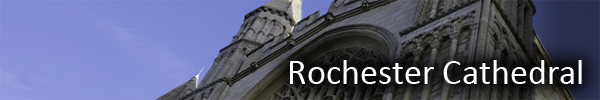
<style>
.page{position:relative;width:600px;height:100px}
.page>*{position:absolute;margin:0}
.t1{font:36px "Calibri";color:#ffffff}
</style>
<div class="page">
<p class="t1" style="left:290px;top:60px;width:292px;height:24px">Rochester Cathedral</p>
</div>
